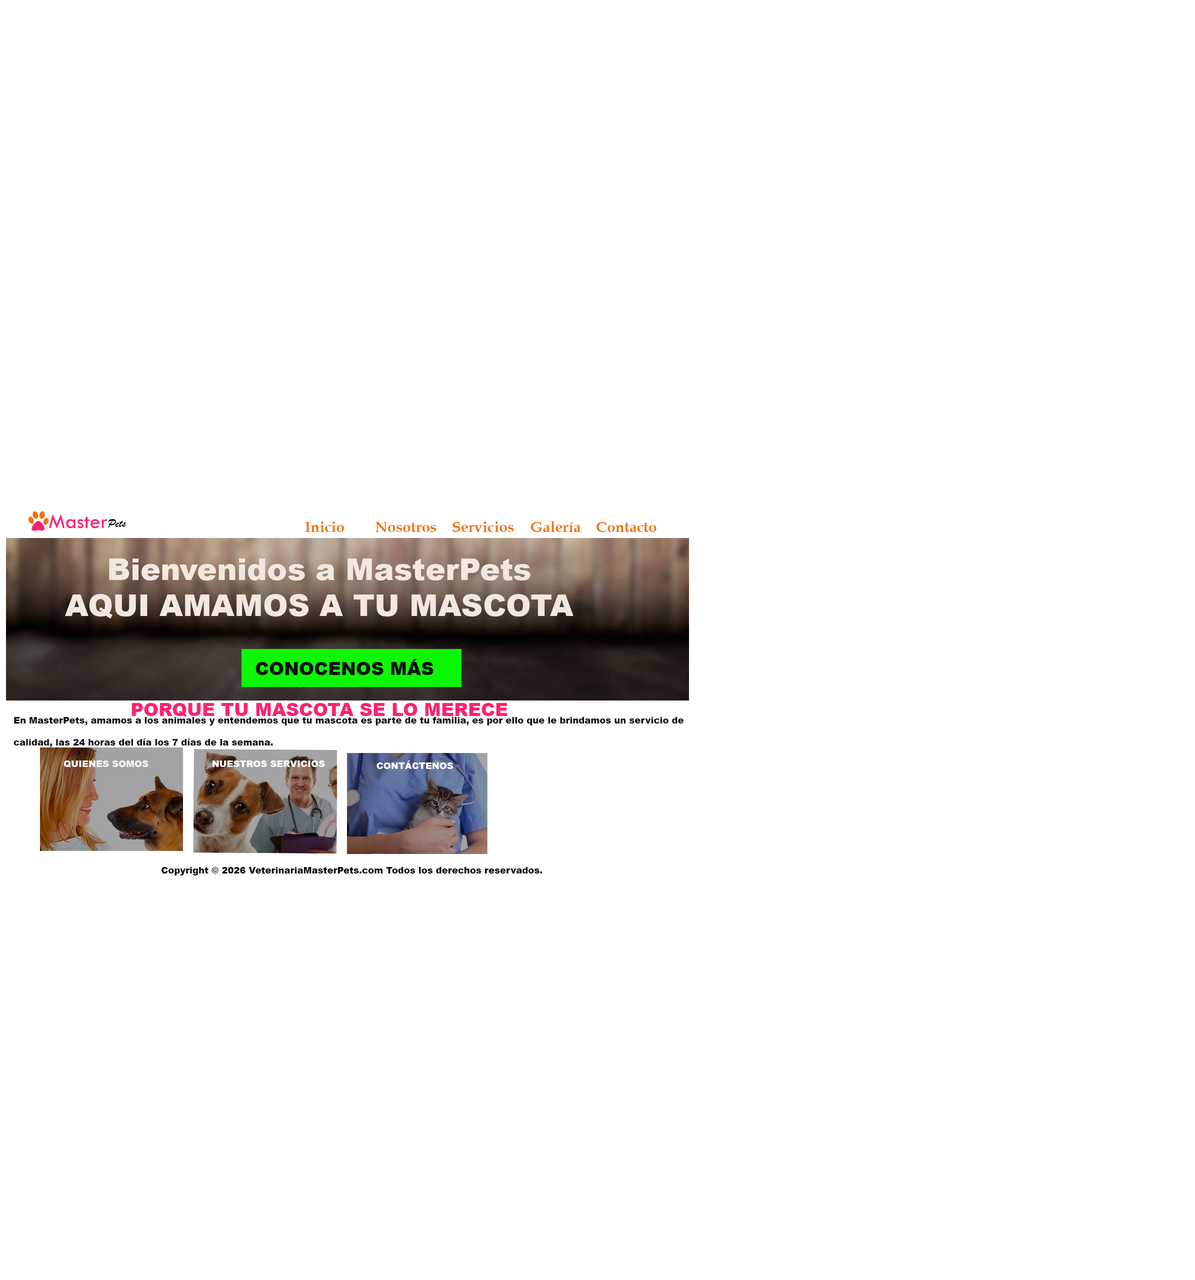
<style>
.page{position:relative;width:1195px;height:1280px;background:#ffffff}
.page>*{position:absolute;margin:0}
.t1{font:15px "BookAntiqua-Bold";color:#f1740c}
.t2{font:31.7px "ForteMT";color:#e82020}
.t3{font:30px "Arial-Black";color:#f3e8df}
.t4{font:18px "Arial-Black";color:#0c0e0c}
.t5{font:18px "Arial-Black";color:#ff2071}
.t6{font:9px "Arial-Black";color:#121011}
.t7{font:9px "Arial-Black";color:#fbf3f6}
.t8{font:9px "Arial-Black";color:#fdfdfd}
.t9{font:9px "Arial-Black";color:#0a090a}
</style>
<div class="page">
<p class="t1" style="left:305px;top:521px;width:351px;height:11px"><span class="t2"><br>                     </span>Inicio  Nosotros    Servicios    Galería    Contacto</p>
<p class="t3" style="left:65px;top:558px;width:509px;height:60px;text-align:center">Bienvenidos a MasterPets<br>AQUI AMAMOS A TU MASCOTA</p>
<p class="t4" style="left:256px;top:659px;width:178px;height:16px">CONOCENOS MÁS</p>
<p class="t5" style="left:132px;top:703px;width:376px;height:14px">PORQUE TU MASCOTA SE LO MERECE</p>
<p class="t6" style="left:14px;top:717px;width:670px;height:31px">En MasterPets, amamos a los animales y entendemos que tu mascota es parte de tu familia, es por ello que le brindamos un servicio de calidad, las 24 horas del día los 7 días de la semana.</p>
<p class="t7" style="left:64px;top:760px;width:84px;height:8px">QUIENES SOMOS</p>
<p class="t8" style="left:212px;top:760px;width:113px;height:7px">NUESTROS SERVICIOS</p>
<p class="t8" style="left:376px;top:760px;width:78px;height:9px">CONTÁCTENOS</p>
<p class="t9" style="left:162px;top:867px;width:380px;height:9px">Copyright © 2026 VeterinariaMasterPets.com Todos los derechos reservados.</p>
</div>
